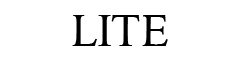
<style>
.page{position:relative;width:244px;height:70px;background:#ffffff}
.page>*{position:absolute;margin:0}
.t1{font:45px "IowanOldStyle-Roman";color:#000000}
</style>
<div class="page">
<p class="t1" style="left:72px;top:15px;width:96px;height:31px">LITE</p>
</div>
